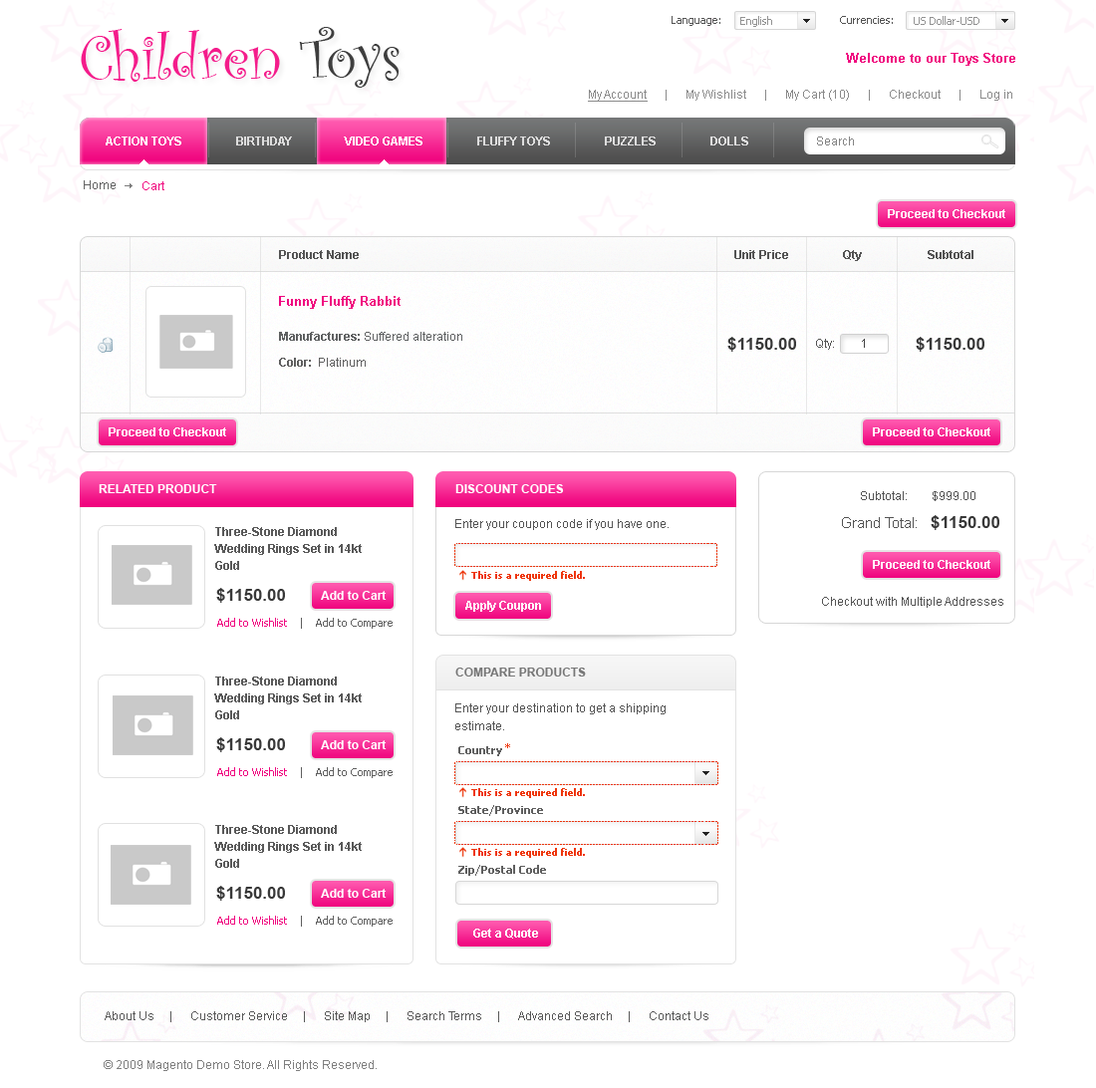
<style>
.page{position:relative;width:1096px;height:1088px;background:#ffffff}
.page>*{position:absolute;margin:0}
.t1{font:11px "Tahoma";color:#545454}
.t2{font:11px "Tahoma";color:#929292}
.t3{font:63.8px "CurlzMT";color:#f41c8b}
.t4{font:63.8px "CurlzMT";color:#3e3e3e}
.t5{font:13px "Arial-BoldMT";color:#f00880}
.t6{font:12px "ArialMT";color:#8a8a8a}
.t7{font:12px "ArialMT";color:#8a8a8a;text-decoration:underline}
.t8{font:12px "Arial-BoldMT";color:#dddddd;text-transform:uppercase}
.t9{font:12px "Arial-BoldMT";color:#fefefe;text-transform:uppercase}
.t10{font:12px "Arial-BoldMT";color:#ffffff;text-transform:uppercase}
.t11{font:12px "ArialMT";color:#848484}
.t12{font:12px "ArialMT";color:#636363}
.t13{font:12px "ArialMT";color:#f00880}
.t14{font:12px "Arial-BoldMT";color:#ffffff}
.t15{font:12px "Arial-BoldMT";color:#545454}
.t16{font:12px/16.9px "ArialMT";color:#5f6162}
.t17{font:12px/16.9px "Arial-BoldMT";color:#5f6162}
.t18{font:12px/25.9px "Arial-BoldMT";color:#5f5f5f}
.t19{font:12px/25.9px "ArialMT";color:#5f5f5f}
.t20{font:16.9px "Arial-BoldMT";color:#383838}
.t21{font:12px "ArialMT";color:#545454}
.t22{font:12px "ArialMT";color:#434343}
.t23{font:12px "Arial-BoldMT";color:#fffefe;text-transform:uppercase}
.t24{font:14.9px "ArialMT";color:#545454}
.t25{font:13.9px "ArialMT";color:#545454}
.t26{font:12px/16.9px "Arial-BoldMT";color:#595959}
.t27{font:10px "Tahoma-Bold";color:#ee350b}
.t28{font:11px "Tahoma";color:#5f5f5f}
.t29{font:11px "Tahoma";color:#f00880}
.t30{font:12px "Arial-BoldMT";color:#777777;text-transform:uppercase}
.t31{font:12px/17.9px "ArialMT";color:#545454}
.t32{font:11px "Tahoma-Bold";color:#5f5f5f}
.t33{font:11px "Tahoma";color:#ee350b}
.t34{font:12px "ArialMT";color:#585858}
.t35{font:12px "ArialMT";color:#7f7f7f}
</style>
<div class="page">
<p class="t1" style="left:672px;top:16px;width:48px;height:10px">Language:</p>
<p class="t2" style="left:740px;top:16px;width:32px;height:11px">English</p>
<p class="t1" style="left:840px;top:16px;width:53px;height:8px">Currencies:</p>
<p class="t2" style="left:914px;top:16px;width:65px;height:9px">US Dollar-USD</p>
<p class="t3" style="left:81px;top:27px;width:319px;height:61px">Children <span class="t4">Toys</span></p>
<p class="t5" style="left:846px;top:53px;width:169px;height:13px">Welcome to our Toys Store</p>
<p class="t6" style="left:588px;top:90px;width:424px;height:12px"><span class="t7">My Account</span>      |      My Wishlist      |      My Cart (10)      |      Checkout      |      Log in</p>
<p class="t8" style="left:106px;top:136px;width:642px;height:9px"><span class="t9">Action toys</span>                  Birthday                <span class="t10">  Video games </span>                 Fluffy toys                  Puzzles                  Dolls</p>
<p class="t11" style="left:817px;top:136px;width:37px;height:9px">Search</p>
<p class="t12" style="left:84px;top:180px;width:32px;height:9px">Home</p>
<p class="t13" style="left:142px;top:181px;width:22px;height:9px">Cart</p>
<p class="t14" style="left:888px;top:209px;width:117px;height:9px">Proceed to Checkout</p>
<p class="t15" style="left:279px;top:250px;width:80px;height:9px">Product Name</p>
<p class="t15" style="left:734px;top:250px;width:54px;height:9px">Unit Price</p>
<p class="t15" style="left:843px;top:250px;width:19px;height:11px">Qty</p>
<p class="t15" style="left:928px;top:250px;width:45px;height:9px">Subtotal</p>
<p class="t5" style="left:279px;top:296px;width:122px;height:13px">Funny Fluffy Rabbit</p>
<p class="t16" style="left:279px;top:332px;width:183px;height:35px"><span class="t17">Manufactures: </span>Suffered alteration<br><span class="t18">Color: </span><span class="t19"> Platinum</span></p>
<p class="t20" style="left:727px;top:337px;width:69px;height:15px">$1150.00</p>
<p class="t21" style="left:816px;top:339px;width:18px;height:11px">Qty:</p>
<p class="t22" style="left:862px;top:339px;width:3px;height:9px">1</p>
<p class="t20" style="left:916px;top:337px;width:68px;height:15px">$1150.00</p>
<p class="t14" style="left:109px;top:427px;width:117px;height:9px">Proceed to Checkout</p>
<p class="t14" style="left:873px;top:427px;width:117px;height:9px">Proceed to Checkout</p>
<p class="t10" style="left:99px;top:484px;width:118px;height:9px">Related product</p>
<p class="t23" style="left:455px;top:484px;width:109px;height:9px">Discount Codes</p>
<p class="t21" style="left:861px;top:491px;width:114px;height:10px">Subtotal:        $999.00</p>
<p class="t21" style="left:455px;top:519px;width:214px;height:11px">Enter your coupon code if you have one.</p>
<p class="t24" style="left:842px;top:517px;width:75px;height:11px">Grand Total<span class="t25">:</span></p>
<p class="t20" style="left:931px;top:515px;width:68px;height:15px">$1150.00</p>
<p class="t26" style="left:214px;top:527px;width:148px;height:43px">Three-Stone Diamond Wedding Rings Set in 14kt Gold</p>
<p class="t14" style="left:873px;top:560px;width:117px;height:9px">Proceed to Checkout</p>
<p class="t27" style="left:471px;top:571px;width:114px;height:10px">This is a required field.</p>
<p class="t20" style="left:216px;top:588px;width:69px;height:15px">$1150.00</p>
<p class="t14" style="left:321px;top:591px;width:66px;height:9px">Add to Cart</p>
<p class="t14" style="left:465px;top:601px;width:76px;height:11px">Apply Coupon</p>
<p class="t21" style="left:822px;top:597px;width:181px;height:11px">Checkout with Multiple Addresses</p>
<p class="t28" style="left:217px;top:618px;width:176px;height:11px"><span class="t29">Add to Wishlist  </span>  |    Add to Compare</p>
<p class="t26" style="left:214px;top:677px;width:148px;height:42px">Three-Stone Diamond Wedding Rings Set in 14kt Gold</p>
<p class="t30" style="left:455px;top:668px;width:131px;height:9px">Compare Products</p>
<p class="t31" style="left:455px;top:703px;width:211px;height:27px">Enter your destination to get a shipping estimate.</p>
<p class="t20" style="left:216px;top:737px;width:69px;height:15px">$1150.00</p>
<p class="t14" style="left:321px;top:740px;width:66px;height:9px">Add to Cart</p>
<p class="t32" style="left:458px;top:746px;width:44px;height:10px">Country</p>
<p class="t33" style="left:505px;top:743px;width:5px;height:5px">*</p>
<p class="t28" style="left:217px;top:767px;width:176px;height:11px"><span class="t29">Add to Wishlist  </span>  |    Add to Compare</p>
<p class="t27" style="left:471px;top:788px;width:114px;height:10px">This is a required field.</p>
<p class="t32" style="left:458px;top:805px;width:85px;height:11px">State/Province</p>
<p class="t26" style="left:214px;top:825px;width:148px;height:43px">Three-Stone Diamond Wedding Rings Set in 14kt Gold</p>
<p class="t27" style="left:471px;top:848px;width:114px;height:10px">This is a required field.</p>
<p class="t32" style="left:458px;top:865px;width:88px;height:11px">Zip/Postal Code</p>
<p class="t20" style="left:216px;top:886px;width:69px;height:15px">$1150.00</p>
<p class="t14" style="left:321px;top:889px;width:66px;height:9px">Add to Cart</p>
<p class="t28" style="left:217px;top:916px;width:176px;height:11px"><span class="t29">Add to Wishlist  </span>  |    Add to Compare</p>
<p class="t14" style="left:473px;top:929px;width:65px;height:10px">Get a Quote</p>
<p class="t34" style="left:105px;top:1011px;width:603px;height:11px">About Us     |      Customer Service     |      Site Map     |      Search Terms     |      Advanced Search     |      Contact Us</p>
<p class="t35" style="left:104px;top:1060px;width:273px;height:11px">© 2009 Magento Demo Store. All Rights Reserved.</p>
</div>
